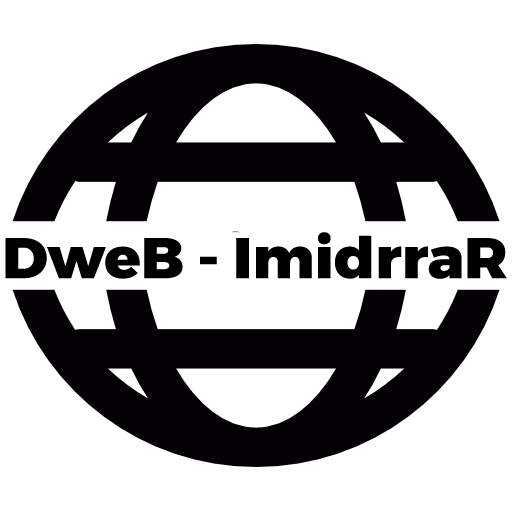
<style>
.page{position:relative;width:512px;height:512px;background:#ffffff}
.page>*{position:absolute;margin:0}
.t1{font:57px "Montserrat-ExtraBold";color:#000000;scale:1.05 1}
</style>
<div class="page">
<p class="t1" style="left:5px;top:232px;width:502px;height:47px">DweB - ImidrraR</p>
</div>
